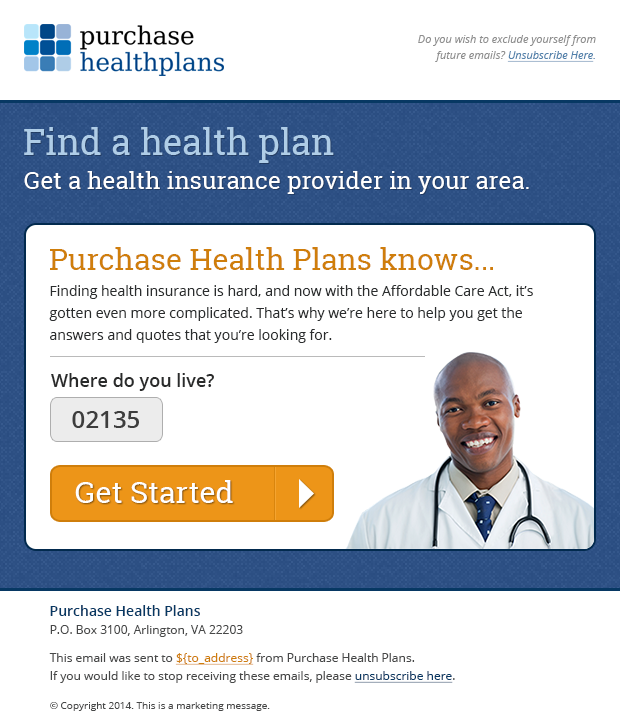
<style>
.page{position:relative;width:620px;height:720px;background:#ffffff}
.page>*{position:absolute;margin:0}
.t1{font:11px/16px "OpenSans-Italic";color:#8f8f8f}
.t2{font:11px/16px "OpenSans-Italic";color:#5181ab;text-decoration:underline}
.t3{font:11px/16px "OpenSans-Italic";color:#5181ab}
.t4{font:36px "RobotoSlab-Regular";color:#afcde7}
.t5{font:24px "RobotoSlab-Regular";color:#ffffff}
.t6{font:30px "RobotoSlab-Regular";color:#cf7e0b}
.t7{font:14px/22px "OpenSans";color:#2b2d2e}
.t8{font:18px "OpenSans-Semibold";color:#2a2b2b}
.t9{font:30px "RobotoSlab-Regular";color:#ffffff}
.t10{font:14px "OpenSans-Semibold";color:#073863}
.t11{font:12px "OpenSans";color:#474848}
.t12{font:12px/18px "OpenSans";color:#474848}
.t13{font:12px/18px "OpenSans";color:#cf7e0b;text-decoration:underline}
.t14{font:12px/18px "OpenSans";color:#073863;text-decoration:underline}
.t15{font:10px "OpenSans";color:#474848}
</style>
<div class="page">
<p class="t1" style="left:418px;top:35px;width:178px;height:27px;text-align:right">Do you wish to exclude yourself from <br>future emails? <span class="t2">Unsubscribe Here</span><span class="t3">.</span></p>
<p class="t4" style="left:24px;top:127px;width:310px;height:36px">Find a health plan</p>
<p class="t5" style="left:24px;top:171px;width:505px;height:23px">Get a health insurance provider in your area.</p>
<p class="t6" style="left:50px;top:247px;width:443px;height:23px">Purchase Health Plans knows...</p>
<p class="t7" style="left:49px;top:285px;width:484px;height:58px">Finding health insurance is hard, and now with the Affordable Care Act, it’s gotten even more complicated. That’s why we’re here to help you get the answers and quotes that you’re looking for.</p>
<p class="t8" style="left:51px;top:373px;width:163px;height:18px">Where do you live?</p>
<p class="t9" style="left:75px;top:480px;width:158px;height:23px">Get Started</p>
<p class="t10" style="left:50px;top:605px;width:150px;height:11px">Purchase Health Plans</p>
<p class="t11" style="left:50px;top:625px;width:193px;height:12px">P.O. Box 3100, Arlington, VA 22203</p>
<p class="t12" style="left:49px;top:653px;width:406px;height:30px">This email was sent to <span class="t13">${to_address}</span> from Purchase Health Plans.<br>If you would like to stop receiving these emails, please <span class="t14">unsubscribe here</span>.</p>
<p class="t15" style="left:50px;top:702px;width:220px;height:9px">© Copyright 2014. This is a marketing message.</p>
</div>
